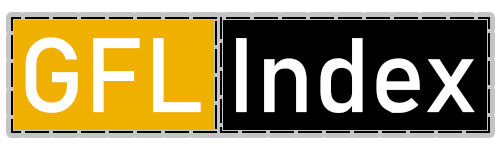
<style>
.page{position:relative;width:500px;height:150px;background:#000000}
.page>*{position:absolute;margin:0}
.t1{font:104px "Bahnschrift";color:#ffffff}
</style>
<div class="page">
<p class="t1" style="left:25px;top:37px;width:450px;height:76px">GFL Index</p>
</div>
